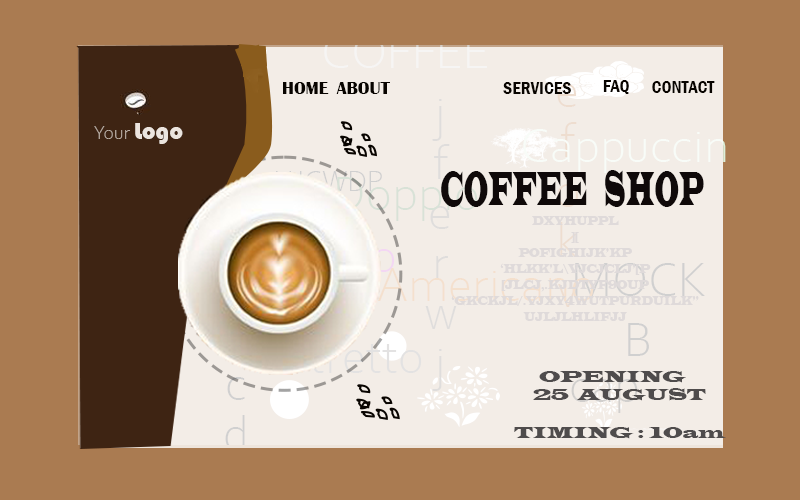
<style>
.page{position:relative;width:800px;height:500px;background:#aa7b51}
.page>*{position:absolute;margin:0}
.t1{font:18px "BritannicBold";color:#080400}
.t2{font:18px "FranklinGothic-DemiCond";color:#080400}
.t3{font:20px "CorbelLight";color:#bbafa5}
.t4{font:24px "Bauhaus93";color:#ebe4de}
.t5{font:49.5px "LatinWide";color:#0f0909;scale:0.37 1}
.t6{font:13.4px "LatinWide";color:#dfdada;scale:0.57 1}
.t7{font:50px "CorbelLight";color:#f4e0cd}
.t8{font:50px "CorbelLight";color:#d0d0d0}
.t9{font:15.7px "LatinWide";color:#4f4c4c}
</style>
<div class="page">
<p class="t1" style="left:283px;top:82px;width:46px;height:12px">HOME</p>
<p class="t1" style="left:336px;top:82px;width:54px;height:12px">ABOUT</p>
<p class="t2" style="left:503px;top:82px;width:68px;height:12px">SERVICES</p>
<p class="t2" style="left:603px;top:80px;width:26px;height:14px">FAQ</p>
<p class="t2" style="left:652px;top:81px;width:63px;height:12px">CONTACT</p>
<p class="t3" style="left:94px;top:123px;width:89px;height:21px">Your <span class="t4">Logo</span></p>
<p class="t5" style="left:441px;top:170px;width:263px;height:37px">COFFEE   SHOP</p>
<p class="t6" style="left:451px;top:216px;width:248px;height:105px;text-align:center">DXYHUPPL<br>][<br>POFIGHIJK’KP<br>‘HLKK’L\VJCJCLJ’[P<br>[JLCJ,.KJDTYF9OUP<br>‘GKCKJL/.VJXY4WUTPURDUILK’’<br>UJLJLHLIFJJ</p>
<p class="t7" style="left:378px;top:268px;width:216px;height:33px">Americano</p>
<p class="t8" style="left:575px;top:263px;width:130px;height:93px;text-align:center">MOCK<br>B</p>
<p class="t9" style="left:514px;top:371px;width:212px;height:68px;text-align:center">OPENING   <br>25  AUGUST<br><br>TIMING : 10am</p>
</div>
